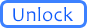
<style>
.page{position:relative;width:87px;height:28px;background:#ffffff}
.page>*{position:absolute;margin:0}
.t1{font:20.3px "Candara";letter-spacing:0.01em;color:#0d60fa}
</style>
<div class="page">
<p class="t1" style="left:13px;top:7px;width:60px;height:15px">Unlock</p>
</div>
